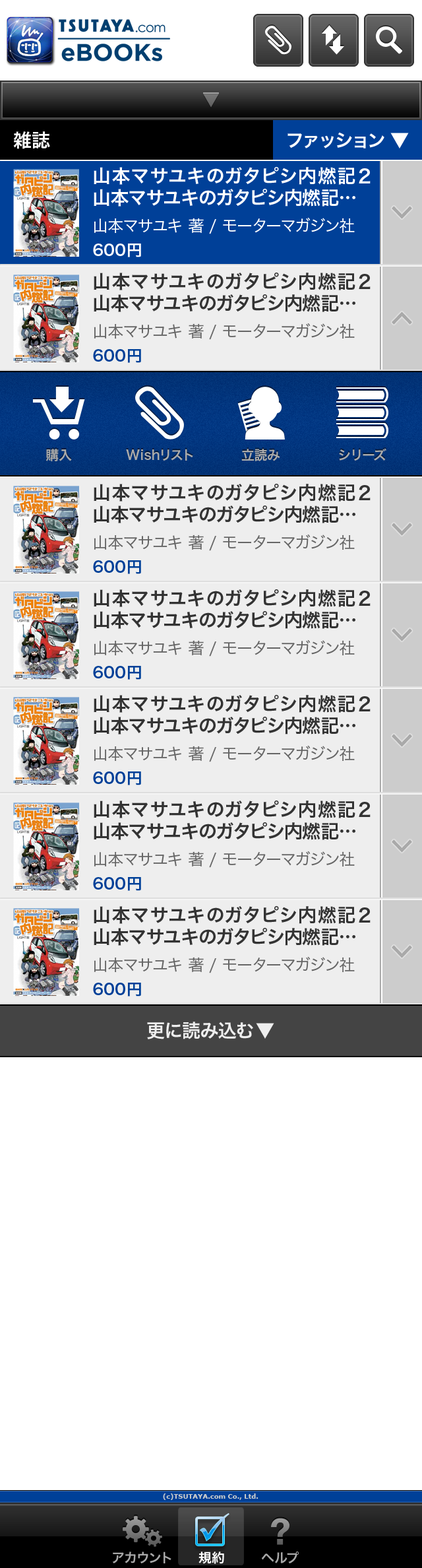
<style>
.page{position:relative;width:422px;height:1568px;background:#ffffff}
.page>*{position:absolute;margin:0}
.t1{font:17.2px "HiraKakuPro-W6";color:#707070}
.t2{font:18.5px "HiraKakuPro-W6";color:#ffffff}
.t3{font:19.8px "HiraKakuPro-W6";color:#ffffff}
.t4{font:18.5px/21.8px "HiraKakuPro-W6";color:#ffffff}
.t5{font:15.8px "HiraKakuPro-W3";color:#ffffff}
.t6{font:15.8px "HiraKakuPro-W6";color:#ffffff}
.t7{font:18.5px/21.8px "HiraKakuPro-W6";color:#333333}
.t8{font:15.8px "HiraKakuPro-W3";color:#666666}
.t9{font:15.8px "HiraKakuPro-W6";color:#004098}
.t10{font:13.2px "HiraKakuPro-W6";color:#aaaaaa}
.t11{font:18.5px "HiraKakuPro-W6";color:#eeeeee}
.t12{font:19.8px "HiraKakuPro-W6";color:#eeeeee}
.t13{font:6.6px "Verdana-Bold";color:#cccccc}
.t14{font:13.2px "HiraKakuPro-W6";color:#a8a8a8}
.t15{font:13.2px "HiraKakuPro-W6";color:#ffffff}
</style>
<div class="page">
<p class="t1" style="left:203px;top:94px;width:16px;height:14px">▼</p>
<p class="t2" style="left:13px;top:131px;width:37px;height:18px">雑誌</p>
<p class="t2" style="left:288px;top:132px;width:97px;height:16px">ファッション</p>
<p class="t3" style="left:391px;top:133px;width:18px;height:15px">▼</p>
<p class="t4" style="left:94px;top:167px;width:277px;height:40px;text-align:justify">山本マサユキのガタピシ内燃記２山本マサユキのガタピシ内燃記…</p>
<p class="t5" style="left:94px;top:217px;width:261px;height:17px">山本マサユキ 著 / モーターマガジン社</p>
<p class="t6" style="left:93px;top:244px;width:48px;height:13px">600円</p>
<p class="t7" style="left:94px;top:273px;width:277px;height:39px;text-align:justify">山本マサユキのガタピシ内燃記２山本マサユキのガタピシ内燃記…</p>
<p class="t8" style="left:94px;top:323px;width:261px;height:17px">山本マサユキ 著 / モーターマガジン社</p>
<p class="t9" style="left:93px;top:349px;width:48px;height:14px">600円</p>
<p class="t10" style="left:46px;top:449px;width:26px;height:12px">購入</p>
<p class="t10" style="left:126px;top:449px;width:67px;height:12px">Wishリスト</p>
<p class="t10" style="left:242px;top:449px;width:38px;height:12px">立読み</p>
<p class="t10" style="left:339px;top:448px;width:48px;height:13px">シリーズ</p>
<p class="t7" style="left:94px;top:484px;width:277px;height:39px;text-align:justify">山本マサユキのガタピシ内燃記２山本マサユキのガタピシ内燃記…</p>
<p class="t8" style="left:94px;top:534px;width:261px;height:17px">山本マサユキ 著 / モーターマガジン社</p>
<p class="t9" style="left:93px;top:560px;width:48px;height:14px">600円</p>
<p class="t7" style="left:94px;top:589px;width:277px;height:40px;text-align:justify">山本マサユキのガタピシ内燃記２山本マサユキのガタピシ内燃記…</p>
<p class="t8" style="left:94px;top:639px;width:261px;height:18px">山本マサユキ 著 / モーターマガジン社</p>
<p class="t9" style="left:93px;top:666px;width:48px;height:14px">600円</p>
<p class="t7" style="left:94px;top:695px;width:277px;height:40px;text-align:justify">山本マサユキのガタピシ内燃記２山本マサユキのガタピシ内燃記…</p>
<p class="t8" style="left:94px;top:745px;width:261px;height:17px">山本マサユキ 著 / モーターマガジン社</p>
<p class="t9" style="left:93px;top:771px;width:48px;height:14px">600円</p>
<p class="t7" style="left:94px;top:800px;width:277px;height:40px;text-align:justify">山本マサユキのガタピシ内燃記２山本マサユキのガタピシ内燃記…</p>
<p class="t8" style="left:94px;top:851px;width:261px;height:17px">山本マサユキ 著 / モーターマガジン社</p>
<p class="t9" style="left:93px;top:877px;width:48px;height:14px">600円</p>
<p class="t7" style="left:94px;top:906px;width:277px;height:40px;text-align:justify">山本マサユキのガタピシ内燃記２山本マサユキのガタピシ内燃記…</p>
<p class="t8" style="left:94px;top:956px;width:261px;height:17px">山本マサユキ 著 / モーターマガジン社</p>
<p class="t9" style="left:93px;top:983px;width:48px;height:13px">600円</p>
<p class="t11" style="left:147px;top:1022px;width:106px;height:17px">更に読み込む</p>
<p class="t12" style="left:256px;top:1023px;width:19px;height:16px">▼</p>
<p class="t13" style="left:163px;top:1493px;width:96px;height:7px">(c)TSUTAYA.com Co., Ltd.</p>
<p class="t14" style="left:112px;top:1552px;width:60px;height:11px">アカウント</p>
<p class="t15" style="left:199px;top:1552px;width:25px;height:12px">規約</p>
<p class="t14" style="left:261px;top:1552px;width:38px;height:12px">ヘルプ</p>
</div>
